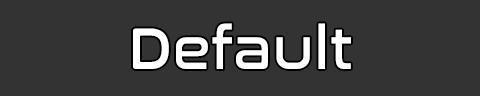
<style>
.page{position:relative;width:480px;height:96px;background:#333333}
.page>*{position:absolute;margin:0}
.t1{font:60px "NasalizationRg-Regular";color:#ffffff}
</style>
<div class="page">
<p class="t1" style="left:133px;top:23px;width:218px;height:46px">Default</p>
</div>
